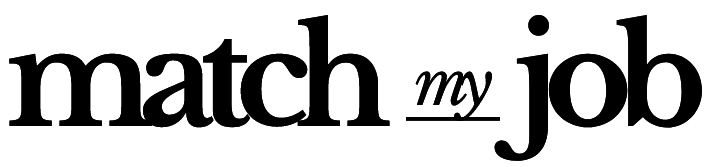
<style>
.page{position:relative;width:723px;height:167px;background:#ffffff}
.page>*{position:absolute;margin:0}
.t1{font:133.8px "LibreBaskerville-Bold";letter-spacing:-0.115em;color:#000000}
.t2{font:62px "LibreBaskerville-Italic";letter-spacing:-0.115em;color:#000000}
</style>
<div class="page">
<p class="t1" style="left:9px;top:14px;width:381px;height:114px">match</p>
<p class="t1" style="left:494px;top:14px;width:208px;height:147px">job</p>
<p class="t2" style="left:415px;top:71px;width:78px;height:51px">my</p>
</div>
